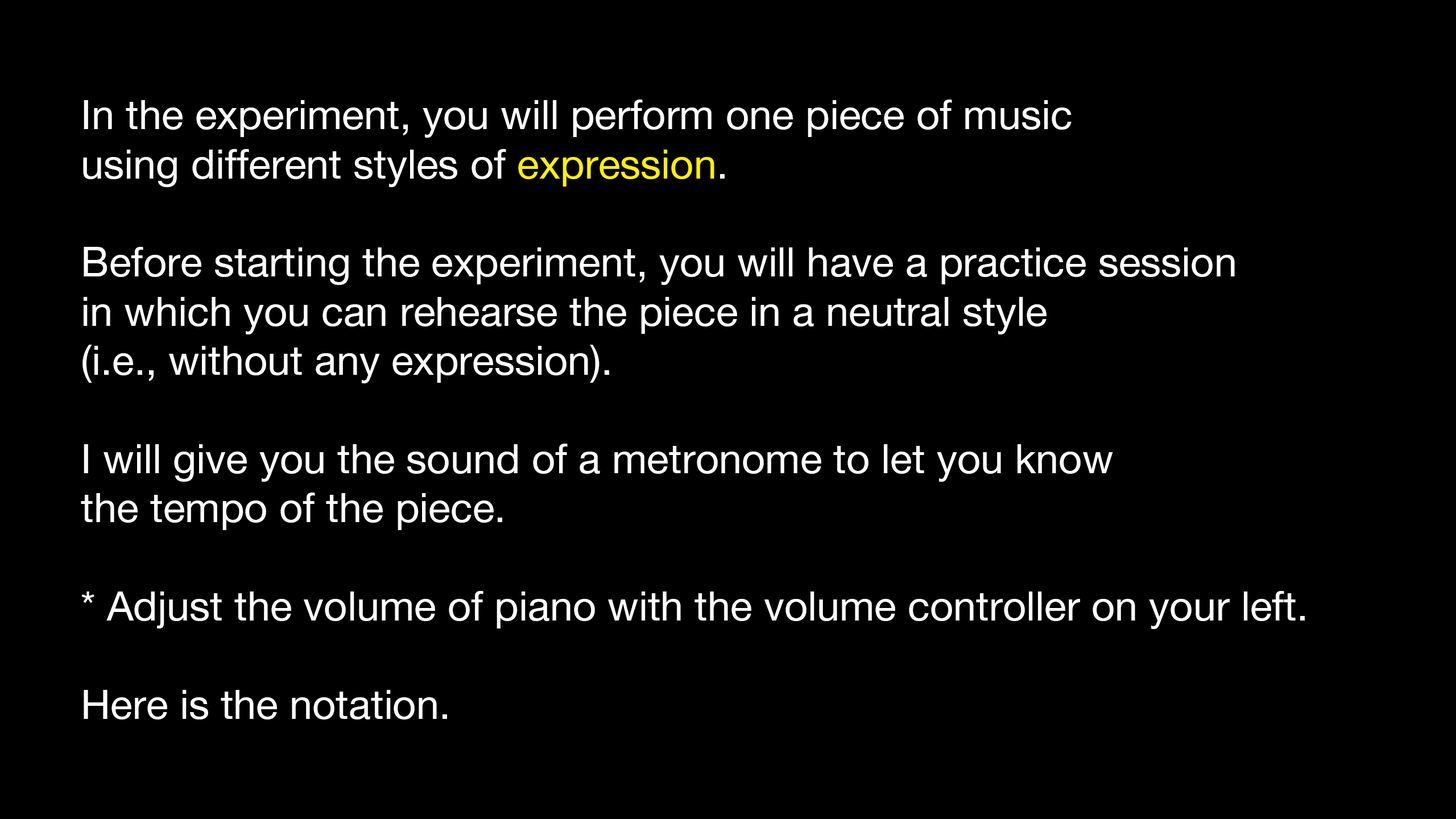
<style>
.page{position:relative;width:1456px;height:819px;background:#000000}
.page>*{position:absolute;margin:0}
.t1{font:40.9px "HelveticaNeue";color:#ffffff}
.t2{font:40.9px "HelveticaNeue";color:#fff200}
</style>
<div class="page">
<p class="t1" style="left:81px;top:100px;width:1224px;height:619px">In the experiment, you will perform one piece of music<br>using different styles of <span class="t2">expression</span>.<br><br>Before starting the experiment, you will have a practice session<br>in which you can rehearse the piece in a neutral style<br>(i.e., without any expression).<br><br>I will give you the sound of a metronome to let you know<br>the tempo of the piece.<br><br>* Adjust the volume of piano with the volume controller on your left.<br><br>Here is the notation.</p>
</div>
